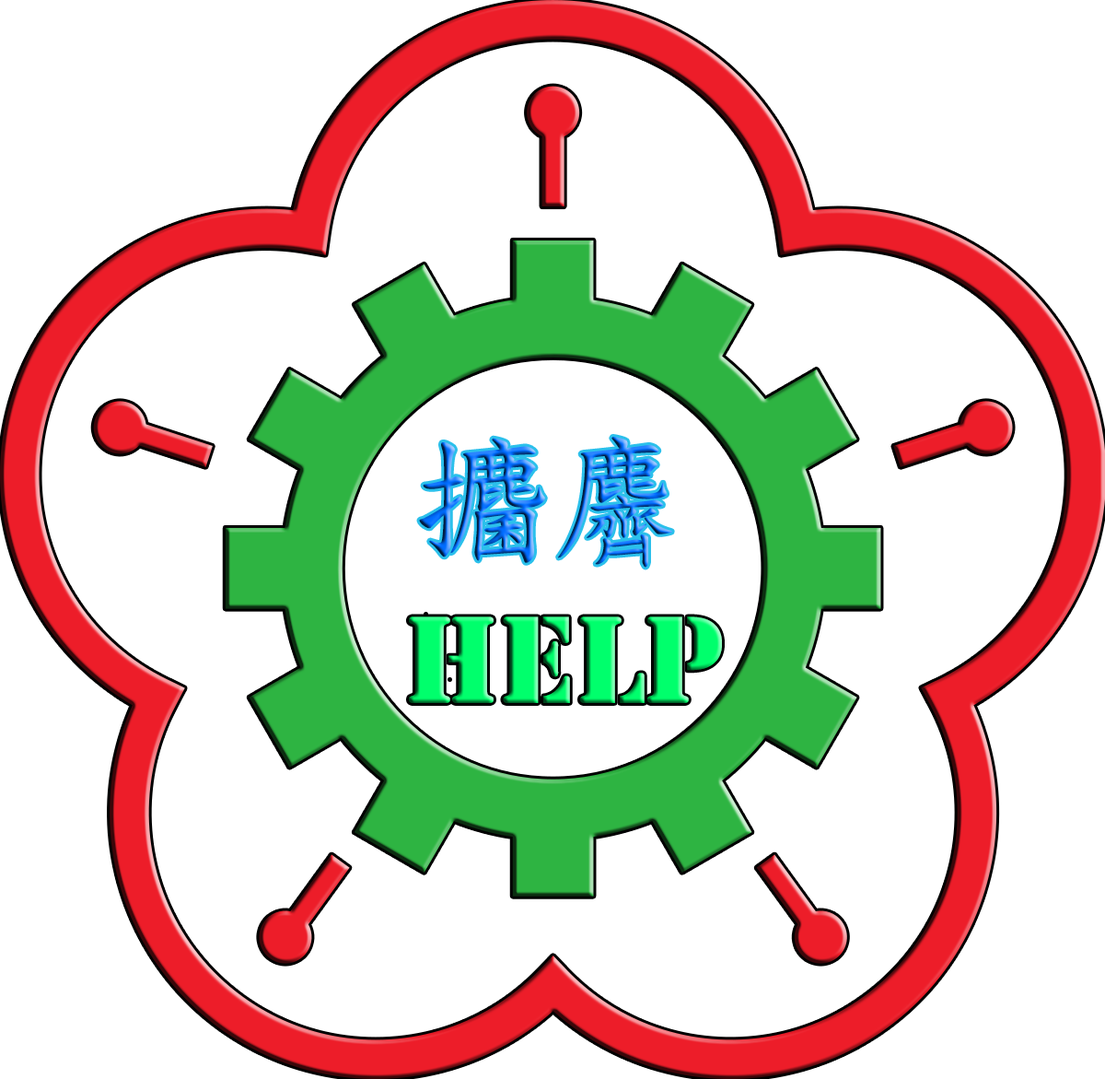
<style>
.page{position:relative;width:1105px;height:1079px;background:#ffffff}
.page>*{position:absolute;margin:0}
.t1{font:138.2px "DFKaiShu-SB-Estd-BF"}
.t2{font:115.1px "StencilStd"}
</style>
<div class="page">
<p class="t1" style="left:419px;top:437px;width:253px;height:130px">攟麡</p>
<p class="t2" style="left:409px;top:616px;width:313px;height:87px">HELP</p>
</div>
